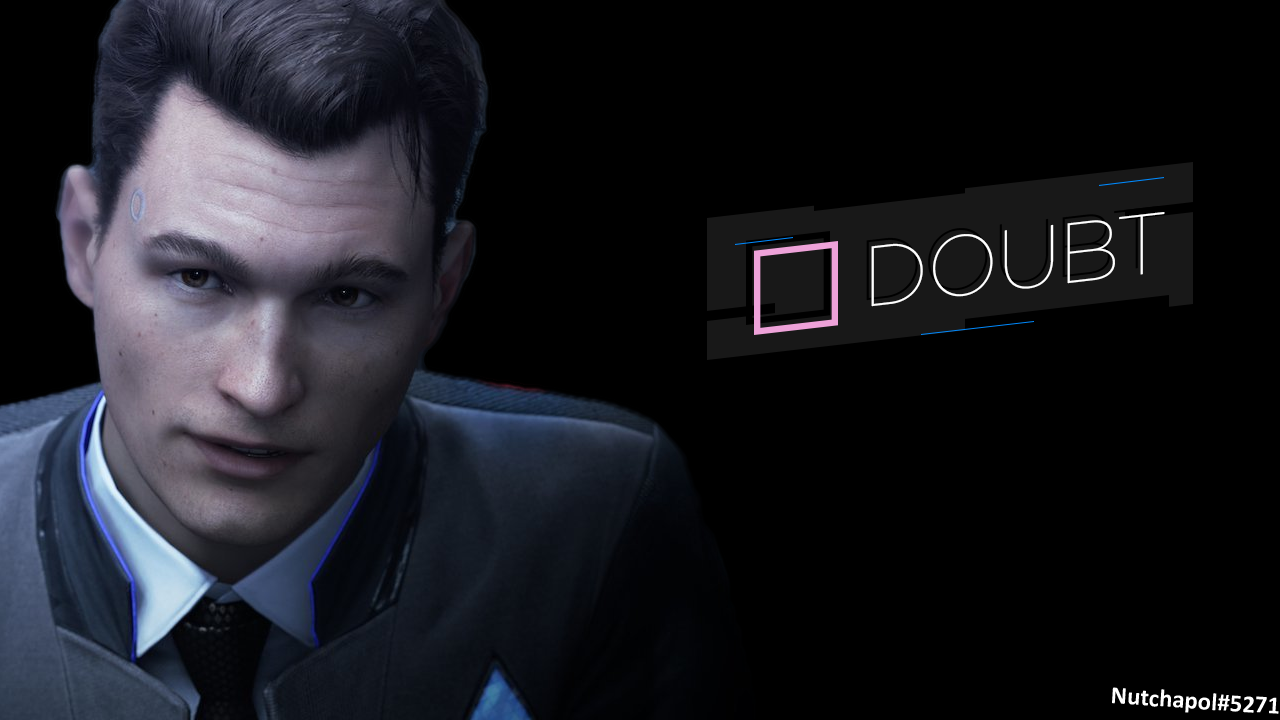
<style>
.page{position:relative;width:1280px;height:720px;background:#000000}
.page>*{position:absolute;margin:0}
.t1{font:85px "Gotham-Thin";letter-spacing:-0.02em;color:#ffffff}
.t2{font:24.9px "Calibri-Bold";color:#ffffff}
</style>
<div class="page">
<p class="t1" style="left:871px;top:212px;width:294px;height:95px;rotate:-7deg">DOUBT</p>
<p class="t2" style="left:1112px;top:687px;width:167px;height:27px;rotate:4deg">Nutchapol#5271</p>
</div>
